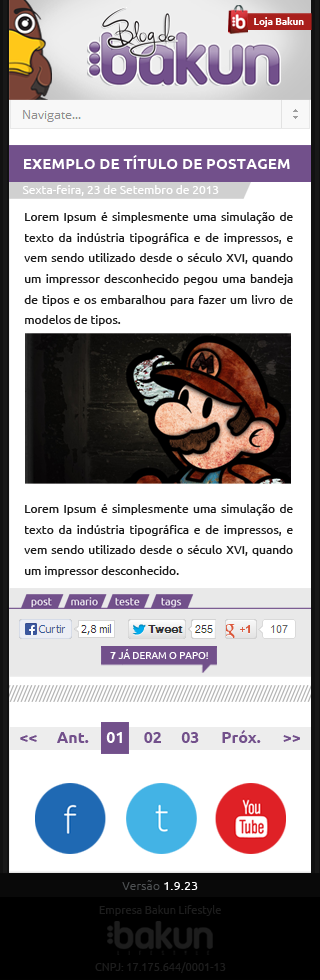
<style>
.page{position:relative;width:320px;height:980px;background:#ffffff}
.page>*{position:absolute;margin:0}
.t1{font:9.6px "Ubuntu-Bold";color:#ffffff}
.t2{font:15.2px "Ubuntu-Bold";color:#ffffff;text-transform:uppercase}
.t3{font:11.9px "Ubuntu";color:#ffffff}
.t4{font:12px/20.6px "Ubuntu";color:#1c1c1c}
.t5{font:10px "Ubuntu";color:#ffffff}
.t6{font:10px "Ubuntu-Bold";color:#ffffff}
.t7{font:15.9px "Ubuntu-Bold";color:#72508b}
.t8{font:15.9px "Ubuntu-Bold";color:#ffffff}
.t9{font:12px "Ubuntu-Light";letter-spacing:0.02em;color:#4e5153}
.t10{font:12px "Ubuntu-Medium";letter-spacing:0.02em;color:#ffffff}
</style>
<div class="page">
<p class="t1" style="left:254px;top:17px;width:50px;height:10px">Loja Bakun</p>
<p class="t2" style="left:24px;top:155px;width:266px;height:14px">Exemplo de Título de Postagem</p>
<p class="t3" style="left:22px;top:185px;width:197px;height:11px">Sexta-feira, 23 de Setembro de 2013</p>
<p class="t4" style="left:24px;top:212px;width:269px;height:114px;text-align:justify">Lorem Ipsum é simplesmente uma simulação de texto da indústria tipográfica e de impressos, e vem sendo utilizado desde o século XVI, quando um impressor desconhecido pegou uma bandeja de tipos e os embaralhou para fazer um livro de modelos de tipos.</p>
<p class="t4" style="left:24px;top:504px;width:269px;height:73px;text-align:justify">Lorem Ipsum é simplesmente uma simulação de texto da indústria tipográfica e de impressos, e vem sendo utilizado desde o século XVI, quando um impressor desconhecido.</p>
<p class="t5" style="left:110px;top:649px;width:98px;height:10px"><span class="t6">7 </span>JÁ DERAM O PAPO!</p>
<p class="t7" style="left:20px;top:735px;width:17px;height:7px">&lt;&lt;</p>
<p class="t7" style="left:57px;top:732px;width:32px;height:11px">Ant.</p>
<p class="t8" style="left:106px;top:732px;width:16px;height:11px">01</p>
<p class="t7" style="left:144px;top:732px;width:17px;height:11px">02</p>
<p class="t7" style="left:181px;top:732px;width:18px;height:11px">03</p>
<p class="t7" style="left:222px;top:730px;width:39px;height:13px">Próx.</p>
<p class="t7" style="left:283px;top:735px;width:17px;height:7px">&gt;&gt;</p>
<p class="t9" style="left:122px;top:880px;width:76px;height:10px">Versão<span class="t10"> 1.9.23</span></p>
</div>
